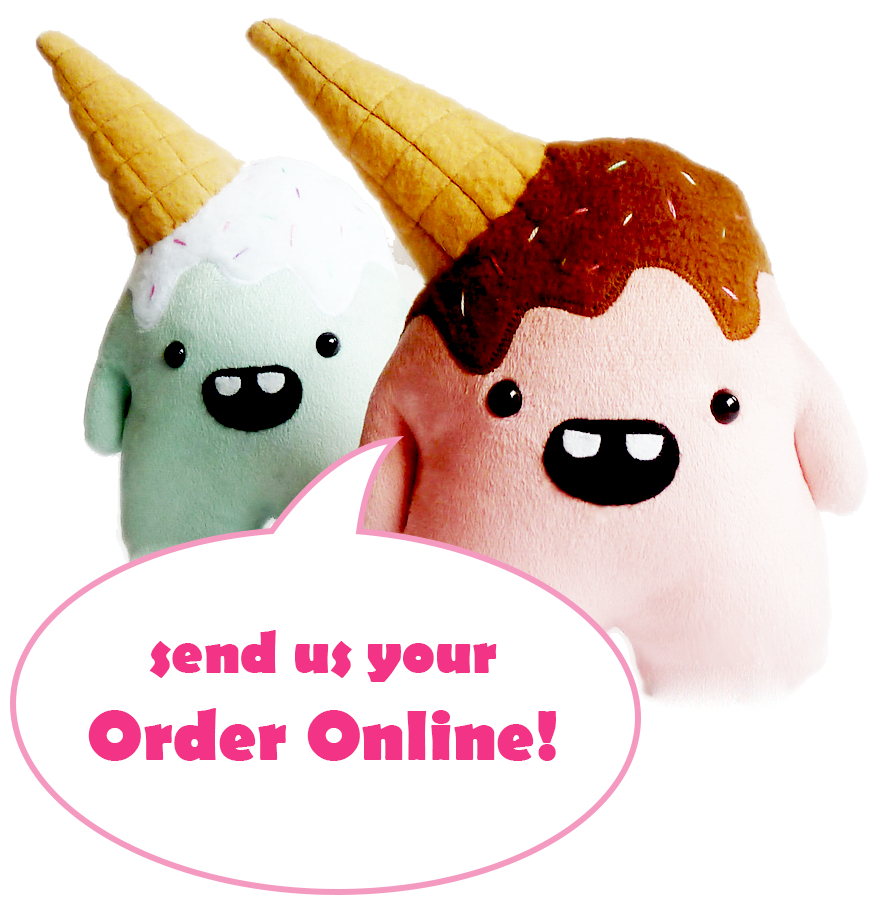
<style>
.page{position:relative;width:886px;height:910px;background:#ffffff}
.page>*{position:absolute;margin:0}
.t1{font:72px "BerlinSansFB-Bold";color:#f33386}
.t2{font:60px "BerlinSansFB-Bold";color:#f33386}
</style>
<div class="page">
<p class="t1" style="left:88px;top:630px;width:468px;height:131px;text-align:center"><span class="t2">send us your<br></span>Order Online!</p>
</div>
